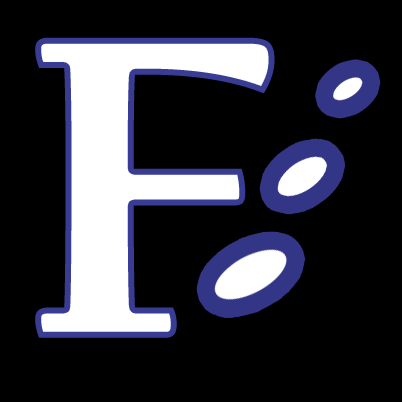
<style>
.page{position:relative;width:402px;height:402px;background:#000000}
.page>*{position:absolute;margin:0}
.t1{font:450px "Kefa-Bold";color:#ffffff}
</style>
<div class="page">
<p class="t1" style="left:35px;top:37px;width:240px;height:301px">F</p>
</div>
